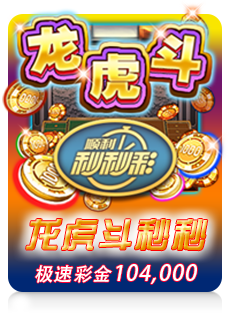
<style>
.page{position:relative;width:230px;height:315px}
.page>*{position:absolute;margin:0}
.t1{font:34.7px "FZZYJW--GB1-0";letter-spacing:0.05em;font-style:italic}
.t2{font:21.3px "AdobeHeitiStd-Regular";letter-spacing:0.05em;color:#fbffff;font-style:italic}
.t3{font:18.7px "AdobeHeitiStd-Regular";letter-spacing:0.05em;color:#fbffff;font-style:italic}
</style>
<div class="page">
<p class="t1" style="left:26px;top:219px;width:182px;height:32px">龙虎斗秒秒</p>
<p class="t1" style="left:26px;top:219px;width:182px;height:32px">龙虎斗秒秒</p>
<p class="t2" style="left:35px;top:264px;width:162px;height:20px"><span class="t3">极速彩金</span>104,000</p>
</div>
